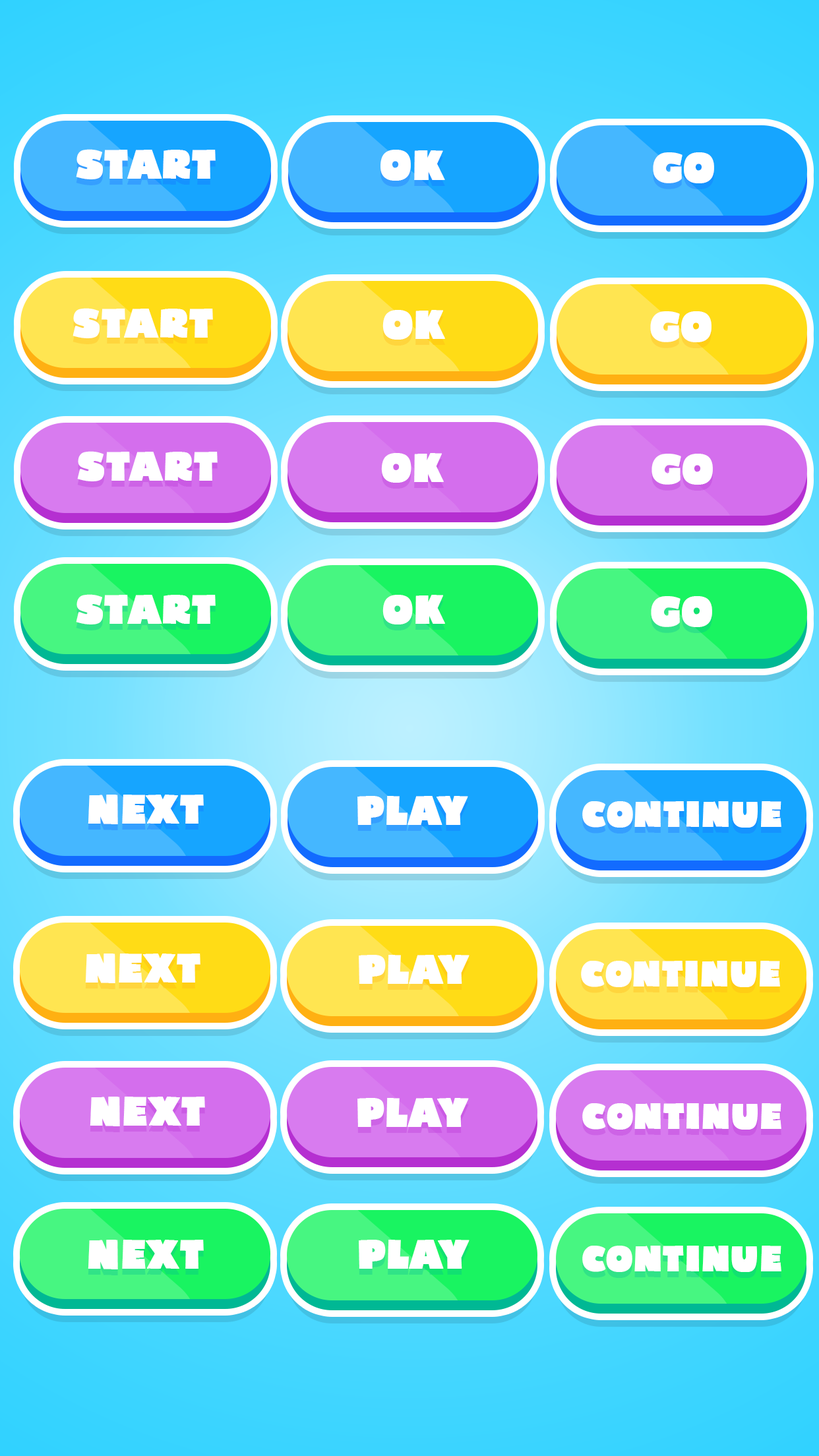
<style>
.page{position:relative;width:819px;height:1456px}
.page>*{position:absolute;margin:0}
.t1{font:38.1px "Bumpo";color:#ffffff;font-weight:bold}
.t2{font:39.6px "Bumpo";color:#ffffff;font-weight:bold}
.t3{font:33.7px "Bumpo";color:#ffffff;font-weight:bold}
</style>
<div class="page">
<p class="t1" style="left:76px;top:149px;width:140px;height:30px">START</p>
<p class="t2" style="left:380px;top:150px;width:65px;height:31px">OK</p>
<p class="t2" style="left:653px;top:152px;width:61px;height:31px">GO</p>
<p class="t1" style="left:73px;top:308px;width:140px;height:30px">START</p>
<p class="t1" style="left:382px;top:310px;width:63px;height:30px">OK</p>
<p class="t2" style="left:650px;top:311px;width:62px;height:31px">GO</p>
<p class="t1" style="left:77px;top:451px;width:141px;height:30px">START</p>
<p class="t1" style="left:381px;top:453px;width:63px;height:30px">OK</p>
<p class="t2" style="left:651px;top:454px;width:62px;height:31px">GO</p>
<p class="t1" style="left:76px;top:594px;width:140px;height:30px">START</p>
<p class="t1" style="left:382px;top:595px;width:63px;height:29px">OK</p>
<p class="t2" style="left:651px;top:596px;width:61px;height:31px">GO</p>
<p class="t1" style="left:88px;top:795px;width:116px;height:29px">NEXT</p>
<p class="t1" style="left:357px;top:796px;width:111px;height:29px">PLAY</p>
<p class="t3" style="left:582px;top:801px;width:199px;height:27px">CONTINUE</p>
<p class="t1" style="left:85px;top:954px;width:115px;height:29px">NEXT</p>
<p class="t1" style="left:359px;top:955px;width:111px;height:29px">PLAY</p>
<p class="t3" style="left:581px;top:961px;width:199px;height:26px">CONTINUE</p>
<p class="t1" style="left:90px;top:1097px;width:115px;height:29px">NEXT</p>
<p class="t1" style="left:357px;top:1098px;width:112px;height:29px">PLAY</p>
<p class="t3" style="left:582px;top:1103px;width:199px;height:27px">CONTINUE</p>
<p class="t1" style="left:88px;top:1240px;width:116px;height:29px">NEXT</p>
<p class="t1" style="left:359px;top:1240px;width:111px;height:29px">PLAY</p>
<p class="t3" style="left:582px;top:1246px;width:199px;height:26px">CONTINUE</p>
</div>
